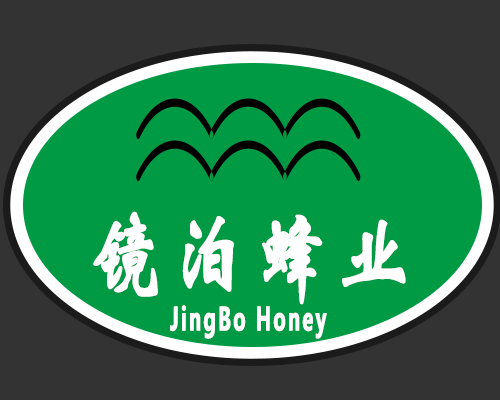
<style>
.page{position:relative;width:500px;height:400px;background:#009944}
.page>*{position:absolute;margin:0}
.t1{font:100px "STXinwei";letter-spacing:0.108em;color:#fefefe;font-weight:bold;scale:0.72 1}
.t2{font:100px "STXingkai";letter-spacing:0.108em;color:#fefefe;font-weight:bold;scale:0.72 1}
.t3{font:31.1px "MicrosoftYaHeiUI-Bold";letter-spacing:0.108em;color:#fefefe;font-weight:bold;scale:0.59 1}
</style>
<div class="page">
<p class="t1" style="left:93px;top:211px;width:313px;height:94px;rotate:1deg">镜泊<span class="t2">蜂</span>业</p>
<p class="t3" style="left:170px;top:305px;width:157px;height:34px">JingBo Honey</p>
</div>
